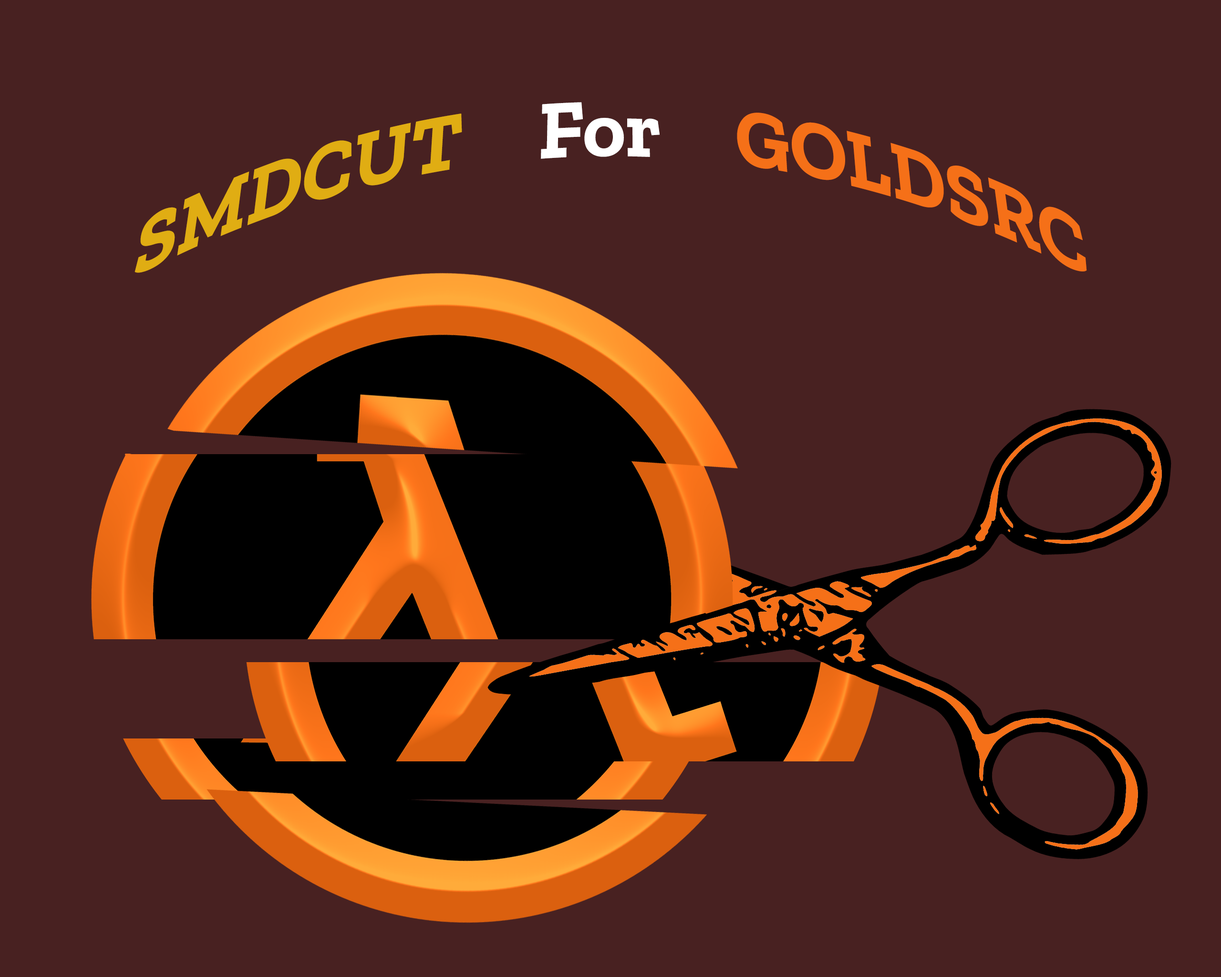
<style>
.page{position:relative;width:1221px;height:977px;background:#482121}
.page>*{position:absolute;margin:0}
.t1{font:94.4px "ZillaSlab-Bold";color:#f57018;scale:0.81 1}
.t2{font:94.4px "ZillaSlab-Bold";color:#e0ad13;scale:0.81 1}
.t3{font:94.4px "ZillaSlab-Bold";color:#ffffff;scale:0.81 1}
</style>
<div class="page">
<p class="t1" style="left:134px;top:102px;width:953px;height:171px;text-align:center"><span class="t2">SMDCUT     </span><span class="t3">For  </span>   GOLDSRC</p>
</div>
